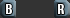
<style>
.page{position:relative;width:70px;height:18px;background:#333333}
.page>*{position:absolute;margin:0}
.t1{font:13px "ZurichBlackBT";letter-spacing:0.025em;color:#ffffff;scale:0.73 1}
</style>
<div class="page">
<p class="t1" style="left:6px;top:4px;width:6px;height:10px">B</p>
<p class="t1" style="left:58px;top:4px;width:6px;height:10px">R</p>
</div>
